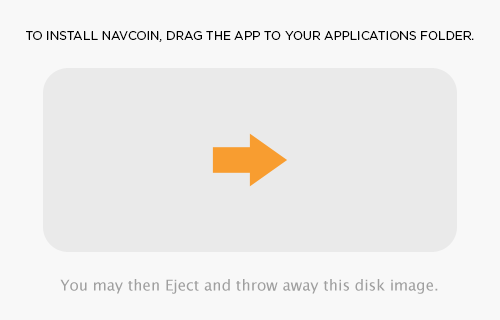
<style>
.page{position:relative;width:500px;height:320px;background:#f8f8f8}
.page>*{position:absolute;margin:0}
.t1{font:12px "GothamHTF-Book";color:#000000}
</style>
<div class="page">
<p class="t1" style="left:26px;top:31px;width:448px;height:11px">TO INSTALL NAVCOIN, DRAG THE APP TO YOUR APPLICATIONS FOLDER.</p>
</div>
